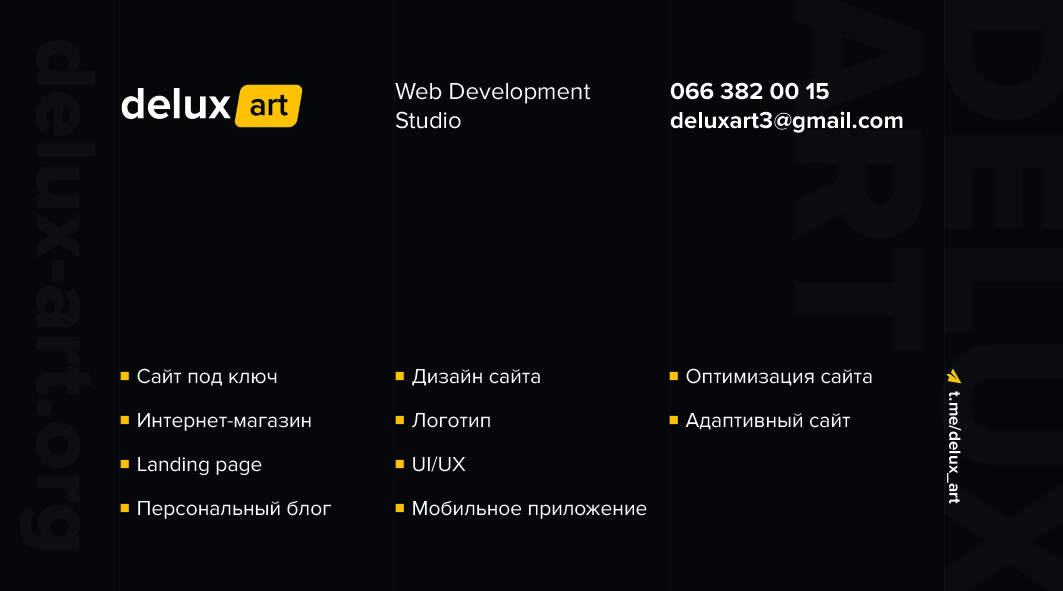
<style>
.page{position:relative;width:1063px;height:591px;background:#050708}
.page>*{position:absolute;margin:0}
.t1{font:87.4px "ProximaNova-Extrabld";color:#0c0f11}
.t2{font:24px "ProximaNova-Regular";color:#ffffff}
.t3{font:24px "ProximaNova-Bold";color:#ffffff}
.t4{font:21px/44px "ProximaNova-Regular";color:#ffffff}
.t5{font:14px/21px "ProximaNova-Regular";color:#ffc100}
</style>
<div class="page">
<p class="t1" style="left:19px;top:40px;width:77px;height:510px;rotate:90deg">delux-art.org</p>
<p class="t2" style="left:395px;top:82px;width:196px;height:47px">Web Development <br>Studio</p>
<p class="t3" style="left:670px;top:82px;width:233px;height:51px">066 382 00 15 <br>deluxart3@gmail.com</p>
<p class="t4" style="left:120px;top:368px;width:212px;height:151px"><span class="t5">■  </span>Сайт под ключ<br><span class="t5">■  </span>Интернет-магазин<br><span class="t5">■  </span>Landing page<br><span class="t5">■  </span>Персональный блог</p>
<p class="t4" style="left:395px;top:368px;width:252px;height:151px"><span class="t5">■  </span>Дизайн сайта<br><span class="t5">■  </span>Логотип<br><span class="t5">■  </span>UI/UX<br><span class="t5">■  </span>Мобильное приложение</p>
<p class="t4" style="left:669px;top:368px;width:203px;height:62px"><span class="t5">■  </span>Оптимизация сайта<br><span class="t5">■  </span>Адаптивный сайт</p>
</div>
